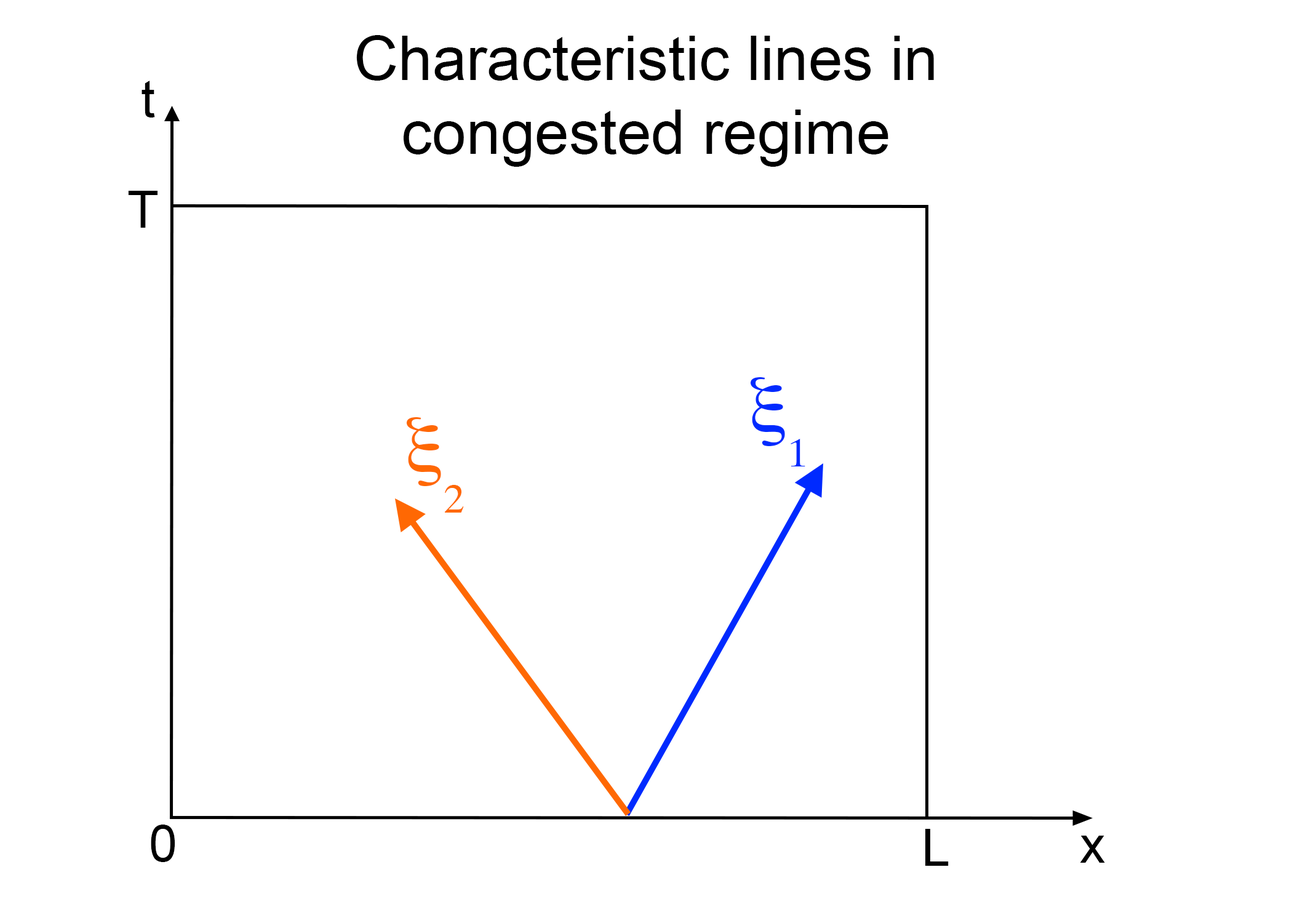
<style>
.page{position:relative;width:1292px;height:923px;background:#ffffff}
.page>*{position:absolute;margin:0}
.t1{font:61.5px "ArialMT";color:#000000}
.t2{font:51.3px "ArialMT";color:#000000}
</style>
<div class="page">
<p class="t1" style="left:356px;top:35px;width:578px;height:132px;text-align:center">Characteristic lines in <br>congested regime</p>
<p class="t2" style="left:142px;top:81px;width:13px;height:37px">t</p>
<p class="t2" style="left:128px;top:191px;width:30px;height:37px">T</p>
<p class="t2" style="left:151px;top:824px;width:24px;height:38px">0</p>
<p class="t2" style="left:925px;top:829px;width:24px;height:37px">L</p>
<p class="t2" style="left:1080px;top:836px;width:25px;height:27px">x</p>
</div>
